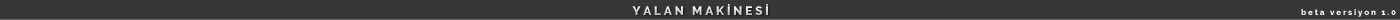
<style>
.page{position:relative;width:1400px;height:20px;background:#373737}
.page>*{position:absolute;margin:0}
.t1{font:12px "Raleway-ExtraBold";letter-spacing:0.23em;color:#dadada}
.t2{font:8px "Raleway-ExtraBold";letter-spacing:0.23em;color:#ffffff}
</style>
<div class="page">
<p class="t1" style="left:632px;top:4px;width:136px;height:11px">YALAN MAKİNESİ</p>
<p class="t2" style="left:1301px;top:9px;width:95px;height:8px">beta versiyon 1.0</p>
</div>
